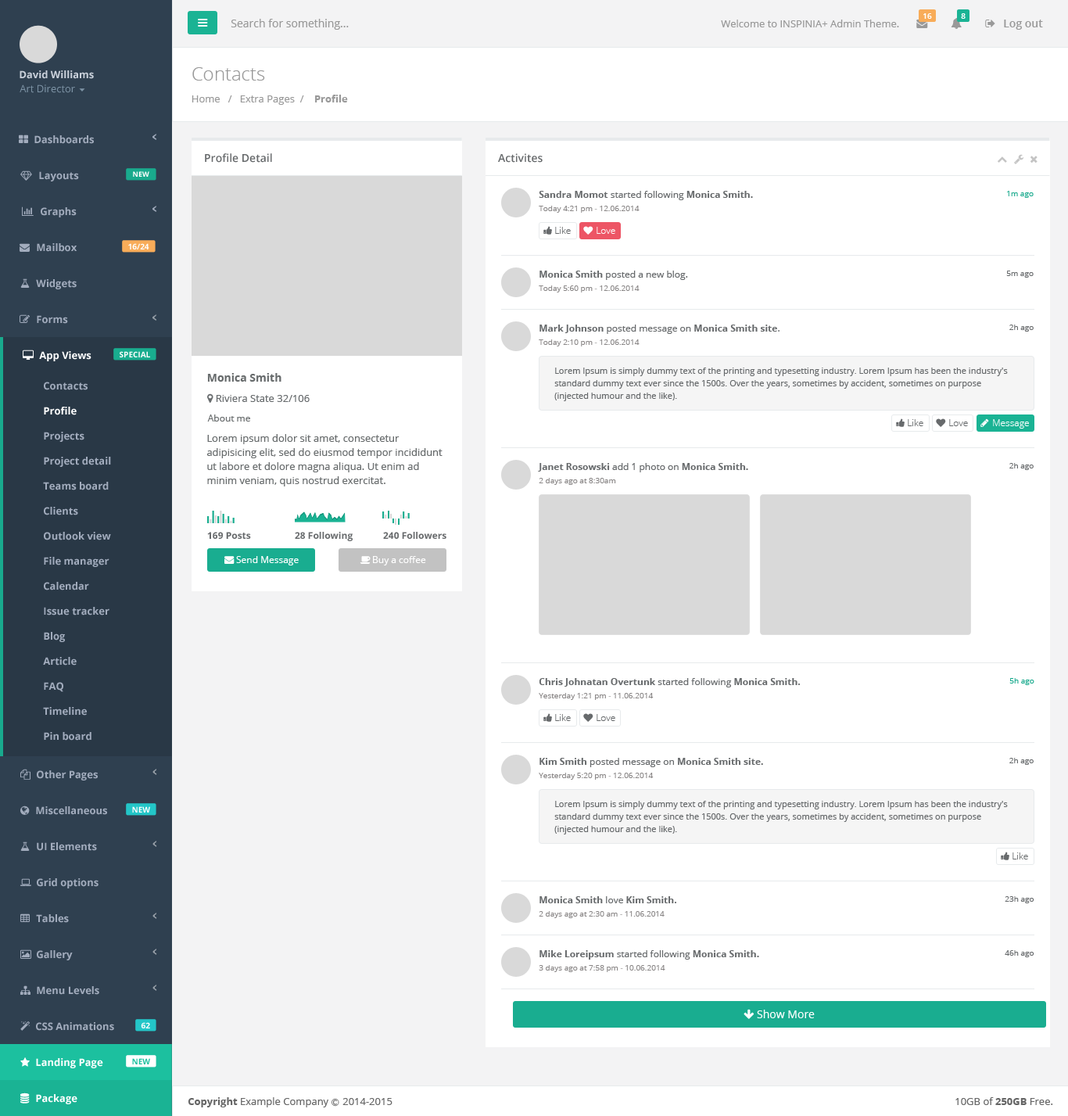
<style>
.page{position:relative;width:1068px;height:1116px;background:#ffffff}
.page>*{position:absolute;margin:0}
.t1{font:7.8px "OpenSans-Semibold";color:#ffffff}
.t2{font:11px "OpenSans";color:#999999}
.t3{font:10.2px "OpenSans";color:#999999}
.t4{font:11px "OpenSans-Semibold";color:#999999}
.t5{font:10.2px "OpenSans-Bold";color:#cad1db}
.t6{font:18.8px "OpenSans-Light";color:#999999}
.t7{font:10.2px "OpenSans";color:#7d93a5}
.t8{font:10.2px "OpenSans-Bold";color:#999999}
.t9{font:10.2px "OpenSans-Bold";color:#a2acbd}
.t10{font:11px "OpenSans-Semibold";color:#676a6c}
.t11{font:7px "OpenSans-Bold";color:#fefefe}
.t12{font:9.4px "OpenSans";color:#676a6c}
.t13{font:9.4px "OpenSans-Bold";color:#676a6c}
.t14{font:7.8px "OpenSans";color:#19aa8d}
.t15{font:7.8px "OpenSans";color:#8b8888}
.t16{font:9.4px "OpenSans-Light";color:#676a6c}
.t17{font:9.4px "OpenSans-Light";color:#ffffff}
.t18{font:7.8px "OpenSans-Bold";color:#fefefe}
.t19{font:7.8px "OpenSans";color:#676a6c}
.t20{font:10.2px "OpenSans-Bold";color:#ffffff}
.t21{font:11px "OpenSans-Bold";color:#686c6d}
.t22{font:8.6px/12.5px "OpenSans";color:#676a6c}
.t23{font:10.2px "OpenSans";color:#686c6d}
.t24{font:9.4px "OpenSans";color:#686c6d}
.t25{font:10.2px/14.1px "OpenSans";color:#686c6d}
.t26{font:9.4px "OpenSans";color:#ffffff}
.t27{font:11px "OpenSans";color:#ffffff}
.t28{font:7.8px "OpenSans-Bold";color:#1cc09f}
.t29{font:10.2px "OpenSans";color:#666666}
.t30{font:10.2px "OpenSans-Bold";color:#666666}
.t31{font:7.8px "Meiryo";color:#666666}
</style>
<div class="page">
<p class="t1" style="left:924px;top:13px;width:8px;height:6px">16</p>
<p class="t1" style="left:961px;top:13px;width:5px;height:6px">8</p>
<p class="t2" style="left:231px;top:19px;width:118px;height:11px">Search for something...</p>
<p class="t3" style="left:721px;top:20px;width:178px;height:7px">Welcome to INSPINIA+ Admin Theme.</p>
<p class="t4" style="left:1004px;top:20px;width:39px;height:10px">Log out</p>
<p class="t5" style="left:20px;top:70px;width:74px;height:9px">David Williams</p>
<p class="t6" style="left:192px;top:67px;width:73px;height:14px">Contacts</p>
<p class="t7" style="left:20px;top:84px;width:55px;height:9px">Art Director</p>
<p class="t3" style="left:192px;top:95px;width:156px;height:10px">Home   /   Extra Pages  /   <span class="t8"> Profile</span></p>
<p class="t9" style="left:34px;top:135px;width:60px;height:9px">Dashboards</p>
<p class="t10" style="left:205px;top:153px;width:67px;height:10px">Profile Detail</p>
<p class="t10" style="left:498px;top:153px;width:45px;height:10px">Activites</p>
<p class="t9" style="left:39px;top:171px;width:40px;height:10px">Layouts</p>
<p class="t11" style="left:133px;top:171px;width:16px;height:6px">NEW</p>
<p class="t12" style="left:539px;top:191px;width:214px;height:9px"><span class="t13">Sandra Momot </span>started following <span class="t13">Monica Smith.</span></p>
<p class="t14" style="left:1007px;top:191px;width:27px;height:7px">1m ago</p>
<p class="t9" style="left:41px;top:207px;width:36px;height:10px">Graphs</p>
<p class="t15" style="left:539px;top:206px;width:101px;height:7px">Today 4:21 pm - 12.06.2014</p>
<p class="t16" style="left:555px;top:227px;width:16px;height:7px">Like</p>
<p class="t17" style="left:597px;top:227px;width:19px;height:7px">Love</p>
<p class="t9" style="left:37px;top:243px;width:40px;height:9px">Mailbox</p>
<p class="t18" style="left:128px;top:243px;width:21px;height:6px">16/24</p>
<p class="t9" style="left:36px;top:279px;width:41px;height:10px">Widgets</p>
<p class="t12" style="left:540px;top:271px;width:148px;height:9px"><span class="t13">Monica Smith </span>posted a new blog.</p>
<p class="t19" style="left:1007px;top:271px;width:27px;height:7px">5m ago</p>
<p class="t15" style="left:539px;top:285px;width:101px;height:8px">Today 5:60 pm - 12.06.2014</p>
<p class="t9" style="left:37px;top:315px;width:31px;height:9px">Forms</p>
<p class="t12" style="left:540px;top:325px;width:240px;height:9px"><span class="t13">Mark Johnson </span>posted message on <span class="t13">Monica Smith site</span>.</p>
<p class="t19" style="left:1010px;top:325px;width:24px;height:7px">2h ago</p>
<p class="t15" style="left:539px;top:339px;width:101px;height:7px">Today 2:10 pm - 12.06.2014</p>
<p class="t20" style="left:39px;top:351px;width:53px;height:10px">App Views</p>
<p class="t18" style="left:120px;top:351px;width:30px;height:6px">SPECIAL</p>
<p class="t21" style="left:207px;top:373px;width:75px;height:9px">Monica Smith</p>
<p class="t22" style="left:555px;top:368px;width:453px;height:33px">Lorem Ipsum is simply dummy text of the printing and typesetting industry. Lorem Ipsum has been the industry's standard dummy text ever since the 1500s. Over the years, sometimes by accident, sometimes on purpose (injected humour and the like).</p>
<p class="t9" style="left:44px;top:382px;width:44px;height:8px">Contacts</p>
<p class="t23" style="left:216px;top:395px;width:94px;height:7px">Riviera State 32/106</p>
<p class="t20" style="left:44px;top:407px;width:33px;height:8px">Profile</p>
<p class="t24" style="left:207px;top:415px;width:43px;height:7px">About me</p>
<p class="t16" style="left:908px;top:419px;width:16px;height:7px">Like</p>
<p class="t16" style="left:950px;top:419px;width:18px;height:7px">Love</p>
<p class="t17" style="left:993px;top:419px;width:36px;height:10px">Message</p>
<p class="t9" style="left:44px;top:432px;width:40px;height:10px">Projects</p>
<p class="t25" style="left:207px;top:434px;width:236px;height:52px">Lorem ipsum dolor sit amet, consectetur adipisicing elit, sed do eiusmod tempor incididunt ut labore et dolore magna aliqua. Ut enim ad minim veniam, quis nostrud exercitat.</p>
<p class="t9" style="left:44px;top:457px;width:67px;height:10px">Project detail</p>
<p class="t13" style="left:538px;top:463px;width:210px;height:9px">Janet Rosowski <span class="t12">add 1 photo on</span> Monica Smith.</p>
<p class="t19" style="left:1010px;top:463px;width:24px;height:7px">2h ago</p>
<p class="t9" style="left:43px;top:482px;width:66px;height:8px">Teams board</p>
<p class="t15" style="left:539px;top:478px;width:77px;height:7px">2 days ago at 8:30am</p>
<p class="t9" style="left:44px;top:507px;width:34px;height:8px">Clients</p>
<p class="t9" style="left:44px;top:532px;width:67px;height:8px">Outlook view</p>
<p class="t13" style="left:207px;top:532px;width:44px;height:7px">169 Posts</p>
<p class="t13" style="left:295px;top:532px;width:58px;height:9px">28 Following</p>
<p class="t13" style="left:383px;top:532px;width:64px;height:7px">240 Followers</p>
<p class="t9" style="left:44px;top:557px;width:65px;height:10px">File manager</p>
<p class="t26" style="left:236px;top:556px;width:63px;height:9px">Send Message</p>
<p class="t26" style="left:373px;top:556px;width:53px;height:9px">Buy a coffee</p>
<p class="t9" style="left:44px;top:582px;width:45px;height:9px">Calendar</p>
<p class="t9" style="left:44px;top:607px;width:65px;height:9px">Issue tracker</p>
<p class="t9" style="left:44px;top:632px;width:21px;height:10px">Blog</p>
<p class="t9" style="left:43px;top:657px;width:34px;height:9px">Article</p>
<p class="t9" style="left:44px;top:682px;width:19px;height:10px">FAQ</p>
<p class="t13" style="left:539px;top:678px;width:261px;height:9px">Chris Johnatan Overtunk <span class="t12">started following </span>Monica Smith.</p>
<p class="t14" style="left:1010px;top:678px;width:25px;height:7px">5h ago</p>
<p class="t15" style="left:539px;top:693px;width:115px;height:7px">Yesterday 1:21 pm - 11.06.2014</p>
<p class="t9" style="left:43px;top:707px;width:44px;height:9px">Timeline</p>
<p class="t16" style="left:555px;top:714px;width:16px;height:7px">Like</p>
<p class="t16" style="left:597px;top:714px;width:19px;height:7px">Love</p>
<p class="t9" style="left:44px;top:732px;width:48px;height:9px">Pin board</p>
<p class="t13" style="left:540px;top:758px;width:223px;height:9px">Kim Smith <span class="t12">posted message on </span>Monica Smith site.</p>
<p class="t19" style="left:1010px;top:758px;width:24px;height:7px">2h ago</p>
<p class="t9" style="left:37px;top:770px;width:61px;height:11px">Other Pages</p>
<p class="t15" style="left:539px;top:773px;width:115px;height:7px">Yesterday 5:20 pm - 12.06.2014</p>
<p class="t9" style="left:36px;top:806px;width:71px;height:9px">Miscellaneous</p>
<p class="t18" style="left:132px;top:806px;width:18px;height:7px">NEW</p>
<p class="t22" style="left:555px;top:801px;width:453px;height:34px">Lorem Ipsum is simply dummy text of the printing and typesetting industry. Lorem Ipsum has been the industry's standard dummy text ever since the 1500s. Over the years, sometimes by accident, sometimes on purpose (injected humour and the like).</p>
<p class="t9" style="left:37px;top:842px;width:60px;height:9px">UI Elements</p>
<p class="t16" style="left:1013px;top:853px;width:16px;height:7px">Like</p>
<p class="t9" style="left:37px;top:878px;width:62px;height:11px">Grid options</p>
<p class="t13" style="left:540px;top:896px;width:137px;height:7px">Monica Smith <span class="t12">love</span> Kim Smith.</p>
<p class="t19" style="left:1005px;top:896px;width:30px;height:7px">23h ago</p>
<p class="t9" style="left:36px;top:914px;width:33px;height:9px">Tables</p>
<p class="t15" style="left:539px;top:911px;width:126px;height:7px">2 days ago at 2:30 am - 11.06.2014</p>
<p class="t9" style="left:37px;top:950px;width:36px;height:10px">Gallery</p>
<p class="t12" style="left:540px;top:950px;width:219px;height:10px"><span class="t13">Mike Loreipsum </span>started following <span class="t13">Monica Smith.</span></p>
<p class="t19" style="left:1005px;top:950px;width:30px;height:7px">46h ago</p>
<p class="t15" style="left:539px;top:965px;width:127px;height:7px">3 days ago at 7:58 pm - 10.06.2014</p>
<p class="t9" style="left:37px;top:986px;width:62px;height:9px">Menu Levels</p>
<p class="t27" style="left:757px;top:1010px;width:58px;height:8px">Show More</p>
<p class="t9" style="left:36px;top:1022px;width:78px;height:9px">CSS Animations</p>
<p class="t18" style="left:141px;top:1022px;width:9px;height:7px">62</p>
<p class="t20" style="left:36px;top:1058px;width:67px;height:10px">Landing Page</p>
<p class="t28" style="left:132px;top:1058px;width:18px;height:6px">NEW</p>
<p class="t20" style="left:36px;top:1094px;width:41px;height:10px">Package</p>
<p class="t29" style="left:188px;top:1097px;width:205px;height:10px"><span class="t30">Copyright</span> Example Company <span class="t31">Ⓒ </span>2014-2015</p>
<p class="t29" style="left:956px;top:1097px;width:98px;height:8px">10GB of <span class="t30">250GB</span> Free.</p>
</div>
